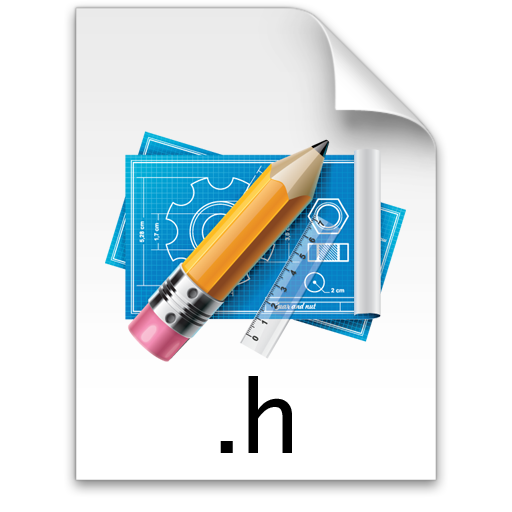
<style>
.page{position:relative;width:512px;height:512px;background:#ffffff}
.page>*{position:absolute;margin:0}
.t1{font:100px "LucidaGrande";letter-spacing:-0.04em;color:#000000}
</style>
<div class="page">
<p class="t1" style="left:220px;top:376px;width:72px;height:77px">.h</p>
</div>
